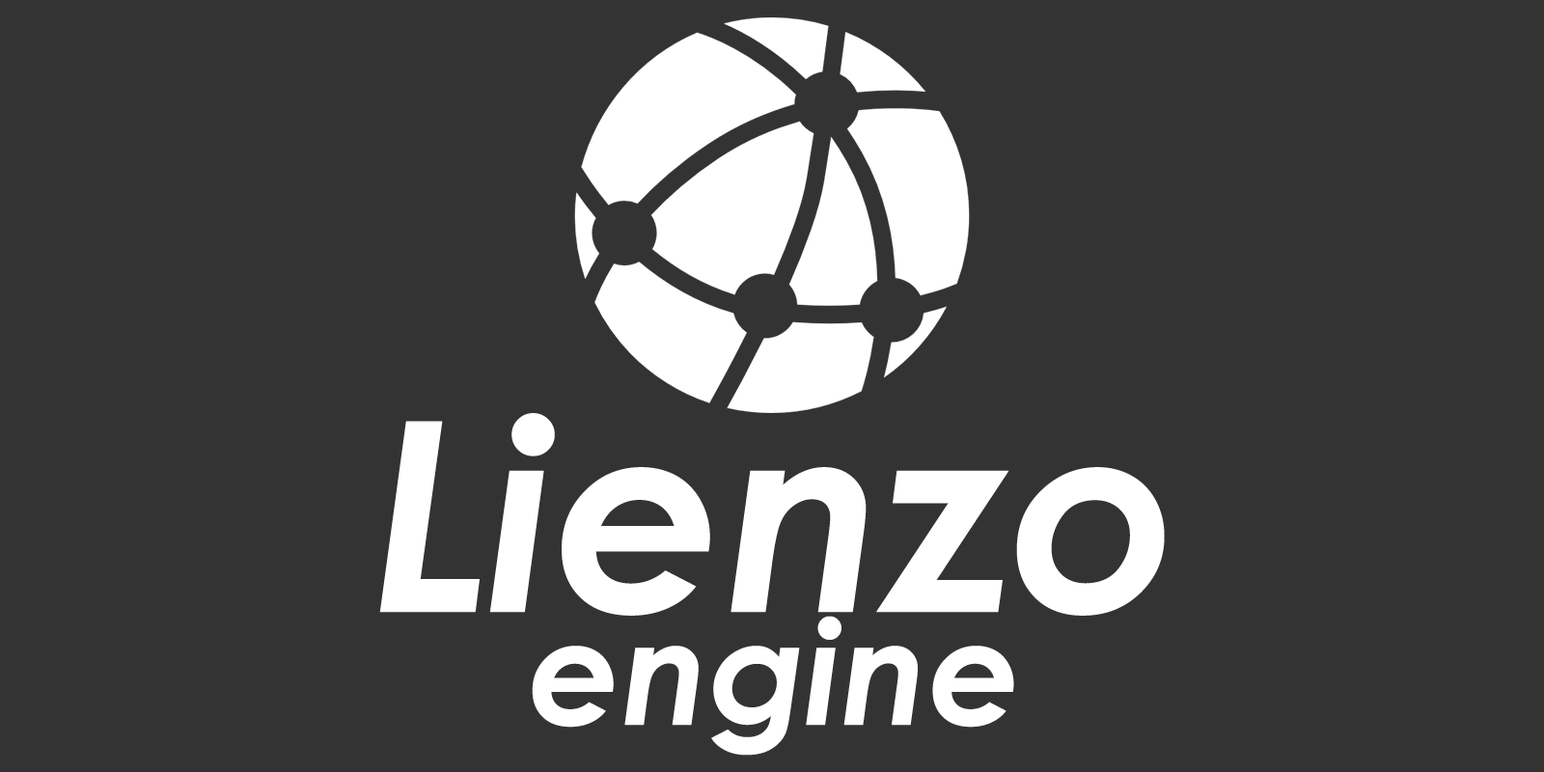
<style>
.page{position:relative;width:1544px;height:772px;background:#333333}
.page>*{position:absolute;margin:0}
.t1{font:265.4px "CenturyGothic-BoldItalic";letter-spacing:0.005em;color:#ffffff}
.t2{font:144.8px "CenturyGothic-BoldItalic";letter-spacing:0.005em;color:#ffffff}
</style>
<div class="page">
<p class="t1" style="left:379px;top:413px;width:786px;height:203px">Lienzo</p>
<p class="t2" style="left:532px;top:616px;width:482px;height:140px">engine</p>
</div>
